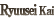
<style>
.page{position:relative;width:54px;height:19px;background:#ffffff}
.page>*{position:absolute;margin:0}
.t1{font:14px "RyuminPro-ExBold";letter-spacing:-0.1em;color:#4a3f32;font-weight:bold;scale:0.8 1}
.t2{font:12px "RyuminPro-ExBold";letter-spacing:-0.1em;color:#4a3f32;font-weight:bold;scale:0.8 1}
</style>
<div class="page">
<p class="t1" style="left:0px;top:4px;width:55px;height:14px">Ryuusei <span class="t2">Kai</span></p>
</div>
